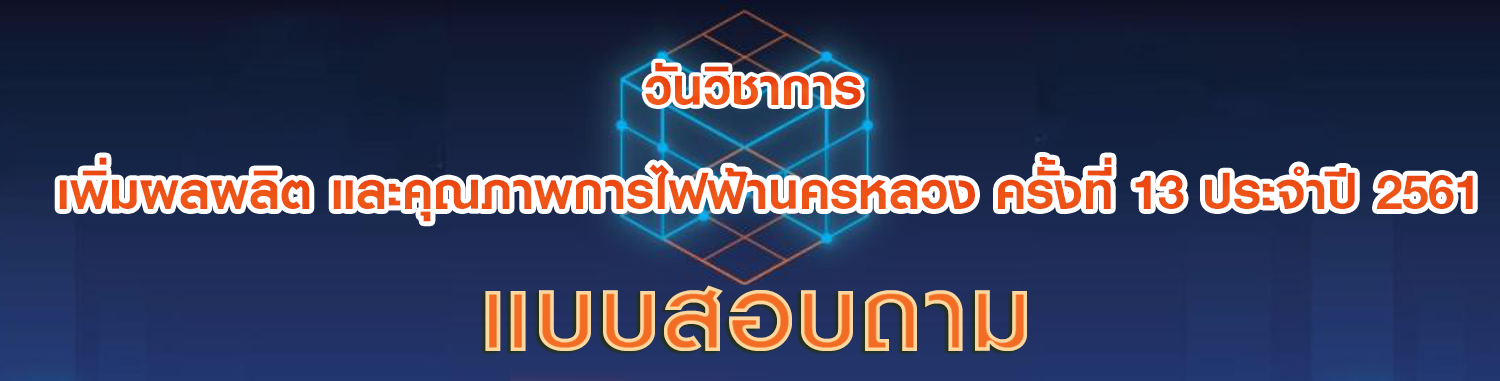
<style>
.page{position:relative;width:1500px;height:381px}
.page>*{position:absolute;margin:0}
.t1{font:72px "KittithadaBold75P";color:#ec4d13}
.t2{font:72px "KittithadaBold75P";color:#ed5115}
.t3{font:150px "KittithadaBold75F"}
</style>
<div class="page">
<p class="t1" style="left:645px;top:62px;width:216px;height:43px">วันวิชาการ</p>
<p class="t2" style="left:59px;top:157px;width:1414px;height:65px">เพิ่มผลผลิต และคุณภาพการไฟฟ้านครหลวง ครั้งที่ 13 ประจำปี 2561</p>
<p class="t3" style="left:485px;top:285px;width:542px;height:66px">แบบสอบถาม</p>
</div>
